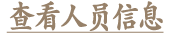
<style>
.page{position:relative;width:170px;height:35px;background:#ffffff}
.page>*{position:absolute;margin:0}
.t1{font:32px "STKaiti-SC-Black";letter-spacing:-0.05em;color:#978169;text-decoration:underline;scale:0.86 1}
</style>
<div class="page">
<p class="t1" style="left:6px;top:1px;width:158px;height:32px">查看人员信息</p>
</div>
